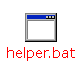
<style>
.page{position:relative;width:80px;height:80px;background:#ffffff}
.page>*{position:absolute;margin:0}
.t1{font:14px "MSReferenceSansSerif";color:#ff0000}
</style>
<div class="page">
<p class="t1" style="left:7px;top:47px;width:68px;height:14px">helper.bat</p>
</div>
